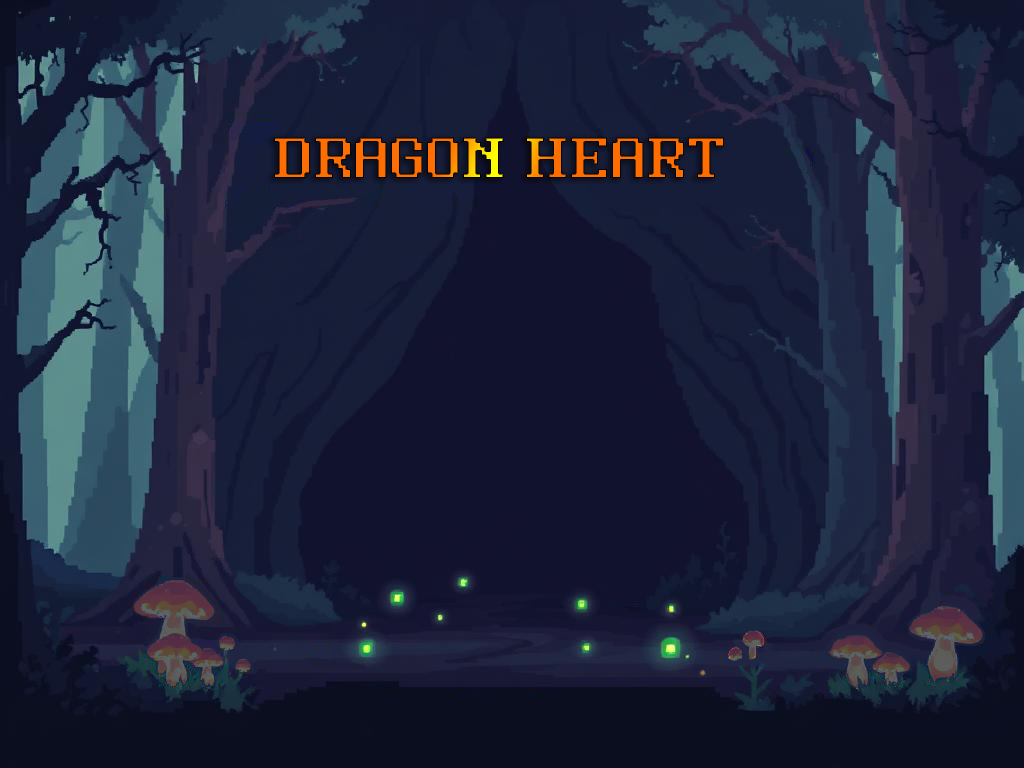
<style>
.page{position:relative;width:1024px;height:768px}
.page>*{position:absolute;margin:0}
.t1{font:72px "Ruler9"}
</style>
<div class="page">
<p class="t1" style="left:274px;top:137px;width:450px;height:41px">DRAGON HEART</p>
</div>
